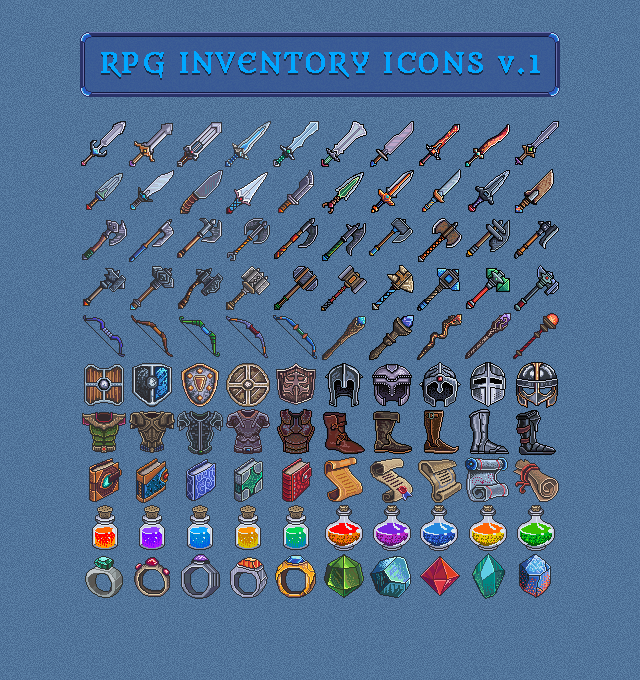
<style>
.page{position:relative;width:640px;height:680px}
.page>*{position:absolute;margin:0}
.t1{font:26px "Metamorphous";letter-spacing:0.005em;color:#00a7ff;font-weight:bold}
</style>
<div class="page">
<p class="t1" style="left:101px;top:51px;width:439px;height:27px">RPG INVENTORY ICONS v.1</p>
</div>
